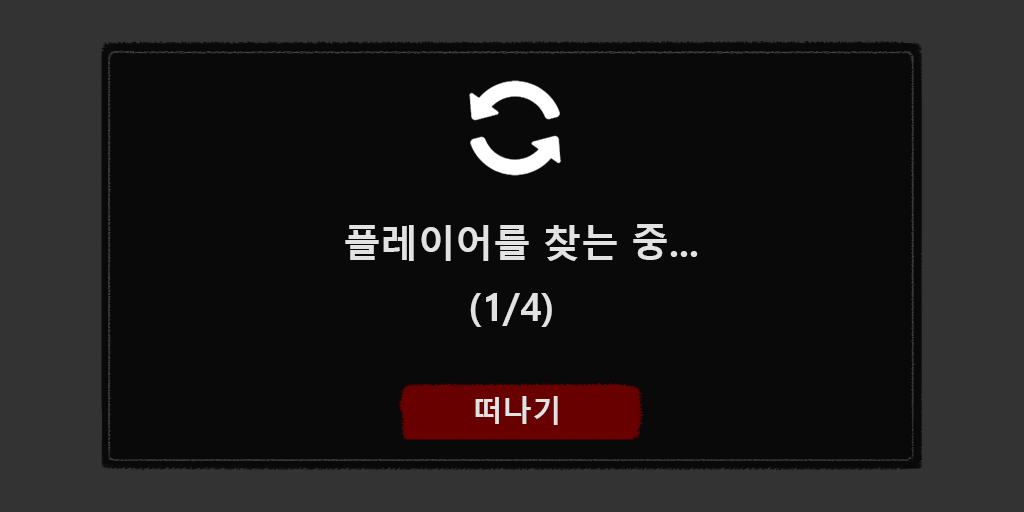
<style>
.page{position:relative;width:1024px;height:512px;background:#090909}
.page>*{position:absolute;margin:0}
.t1{font:37.5px "MalgunGothicBold";color:#e2e2e2}
.t2{font:29.7px "MalgunGothicBold";color:#e2e2e2}
</style>
<div class="page">
<p class="t1" style="left:345px;top:224px;width:353px;height:37px">플레이어를 찾는 중...</p>
<p class="t1" style="left:470px;top:293px;width:82px;height:34px">(1/4)</p>
<p class="t2" style="left:475px;top:396px;width:83px;height:29px">떠나기</p>
</div>
